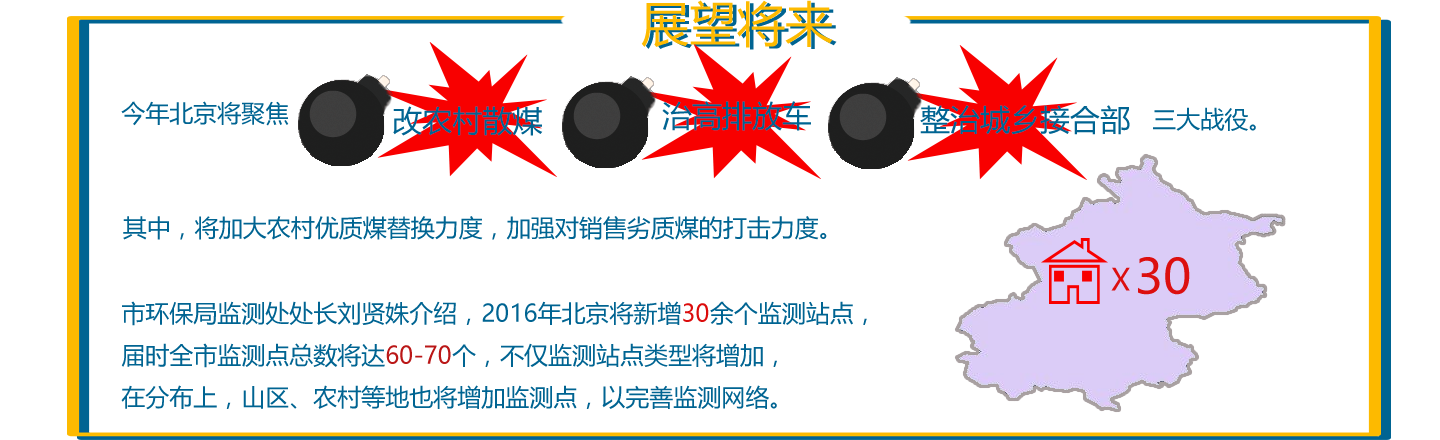
<style>
.page{position:relative;width:1440px;height:440px;background:#ffffff}
.page>*{position:absolute;margin:0}
.t1{font:24px "MicrosoftYaHei";color:#006492}
.t2{font:30px "MicrosoftYaHei";color:#006492}
.t3{font:24px "MicrosoftYaHei";color:#db0c0c}
.t4{font:24px "MicrosoftYaHei";color:#ba1717}
.t5{font:24px/30px "MicrosoftYaHei";color:#006492}
</style>
<div class="page">
<p class="t1" style="left:121px;top:101px;width:168px;height:25px">今年北京将聚焦</p>
<p class="t2" style="left:662px;top:101px;width:149px;height:30px">治高排放车</p>
<p class="t2" style="left:393px;top:106px;width:150px;height:30px">改农村散煤</p>
<p class="t2" style="left:920px;top:105px;width:210px;height:30px">整治城乡接合部</p>
<p class="t1" style="left:1153px;top:107px;width:103px;height:24px">三大战役。</p>
<p class="t1" style="left:123px;top:216px;width:704px;height:24px">其中，将加大农村优质煤替换力度，加强对销售劣质煤的打击力度。</p>
<p class="t1" style="left:121px;top:301px;width:746px;height:109px">市环保局监测处处长刘贤姝介绍，2016年北京将新增<span class="t3">30</span>余个监测站点，<br>届时全市监测点总数将达<span class="t4">60-70</span>个，不仅监测站点类型将增加，<br>在分布上，山区、农村等地也将增加监测点，以完善监测网络<span class="t5">。</span></p>
</div>
